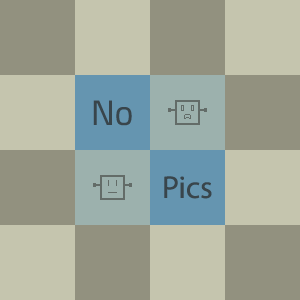
<style>
.page{position:relative;width:300px;height:300px;background:#c5c5ae}
.page>*{position:absolute;margin:0}
.t1{font:35px "TitilliumWeb-Regular";color:#39454b}
.t2{font:31.8px "MyriadPro-Regular";color:#39454b}
</style>
<div class="page">
<p class="t1" style="left:93px;top:100px;width:39px;height:26px">No</p>
<p class="t2" style="left:164px;top:176px;width:48px;height:23px">‏Pics</p>
</div>
